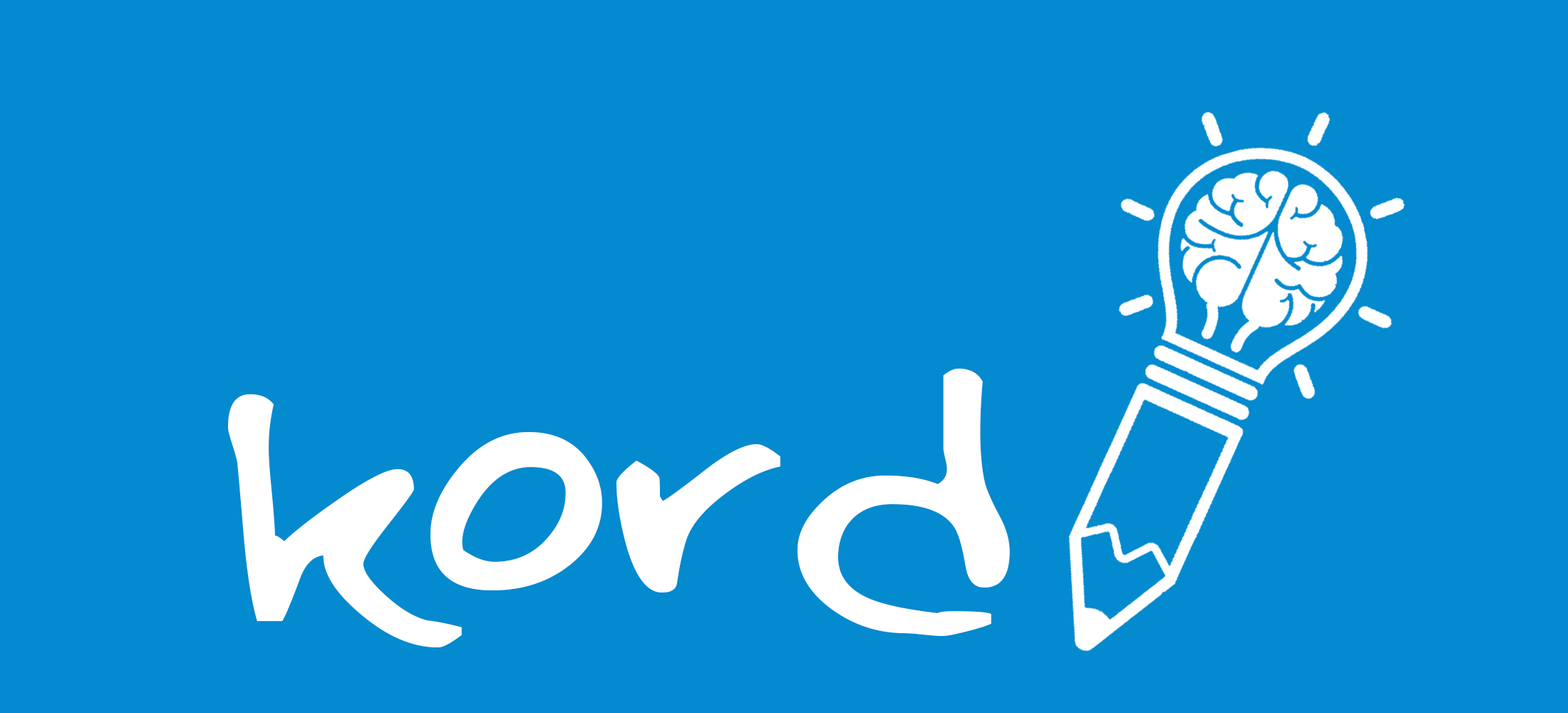
<style>
.page{position:relative;width:1568px;height:713px;background:#038acf}
.page>*{position:absolute;margin:0}
.t1{font:559.8px "Rabiohead";letter-spacing:-0.05em;color:#ffffff;scale:1.27 1}
</style>
<div class="page">
<p class="t1" style="left:227px;top:368px;width:783px;height:279px">kord</p>
</div>
